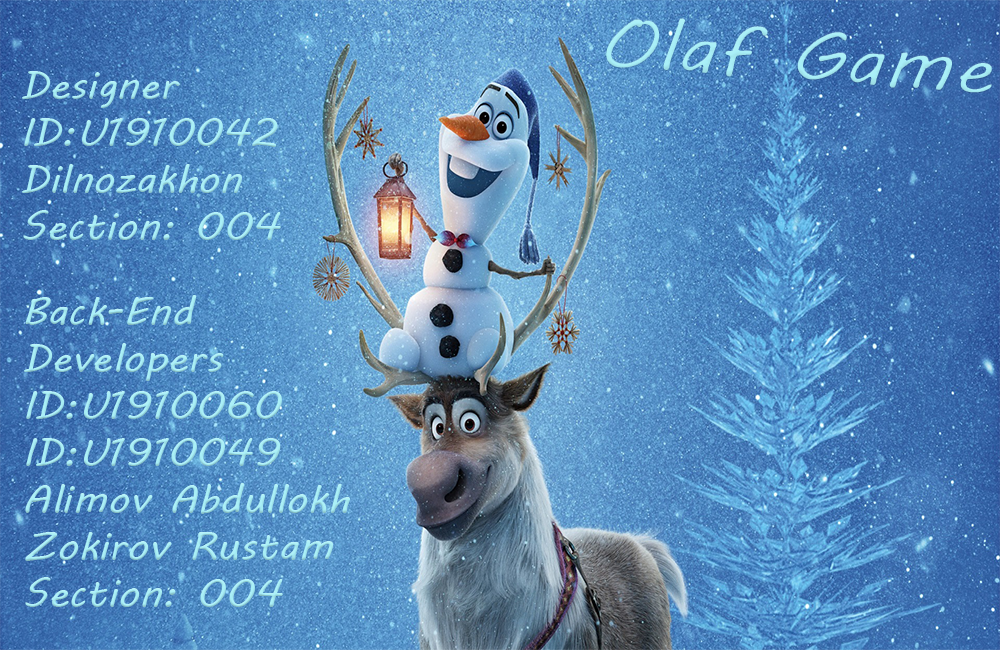
<style>
.page{position:relative;width:1000px;height:650px}
.page>*{position:absolute;margin:0}
.t1{font:72px "MVBoli";color:#a8eff7;scale:1.14 1}
.t2{font:39.1px "MVBoli";color:#a8eff7;scale:1.05 1}
</style>
<div class="page">
<p class="t1" style="left:605px;top:17px;width:388px;height:77px;rotate:4deg">Olaf Game</p>
<p class="t2" style="left:22px;top:71px;width:259px;height:169px">Designer <br>ID:U1910042<br>Dilnozakhon<br>Section: 004</p>
<p class="t2" style="left:24px;top:295px;width:326px;height:312px">Back-End <br>Developers<br>ID:U1910060<br>ID:U1910049<br>Alimov Abdullokh<br>Zokirov Rustam<br>Section: 004</p>
</div>
